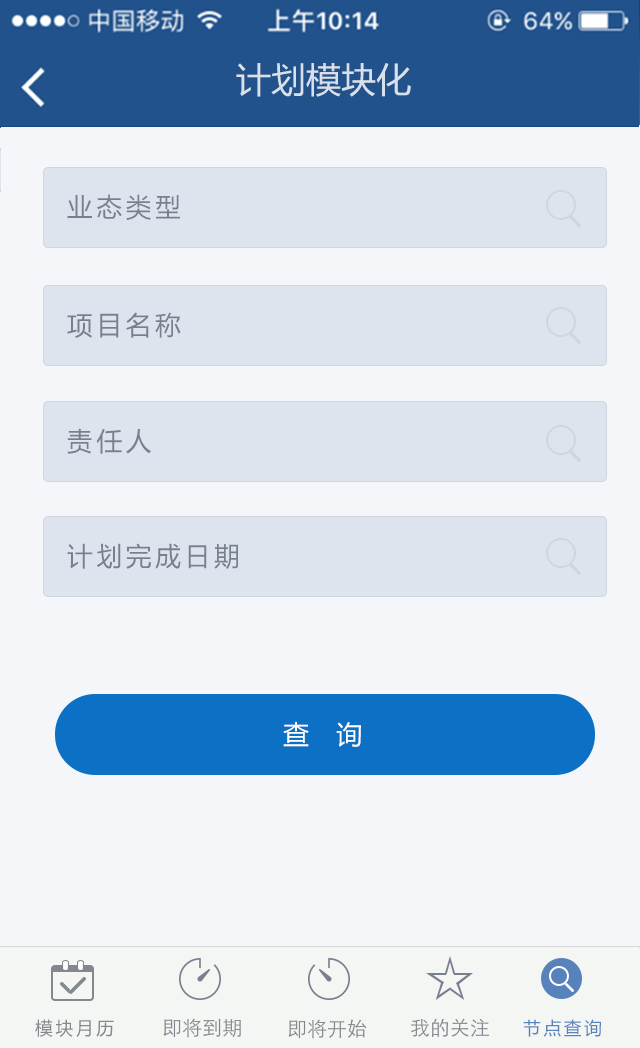
<style>
.page{position:relative;width:640px;height:1048px;background:#f4f6f9}
.page>*{position:absolute;margin:0}
.t1{font:35px "MicrosoftYaHei";color:#d8e1eb}
.t2{font:26.1px "MicrosoftYaHei";letter-spacing:0.15em;color:#77808f}
.t3{font:26px "MicrosoftYaHei";letter-spacing:0.15em;color:#ffffff}
.t4{font:18px "MicrosoftYaHei";letter-spacing:0.15em;color:#81888e}
.t5{font:18px "MicrosoftYaHei";letter-spacing:0.15em;color:#5882bc}
</style>
<div class="page">
<p class="t1" style="left:236px;top:63px;width:175px;height:34px">计划模块化</p>
<p class="t2" style="left:67px;top:194px;width:113px;height:26px">业态类型</p>
<p class="t2" style="left:67px;top:312px;width:114px;height:26px">项目名称</p>
<p class="t2" style="left:67px;top:428px;width:84px;height:26px">责任人</p>
<p class="t2" style="left:67px;top:543px;width:171px;height:26px">计划完成日期</p>
<p class="t3" style="left:283px;top:722px;width:78px;height:25px">查  询</p>
<p class="t4" style="left:35px;top:1019px;width:79px;height:18px">模块月历</p>
<p class="t5" style="left:523px;top:1019px;width:78px;height:18px">节点查询</p>
</div>
